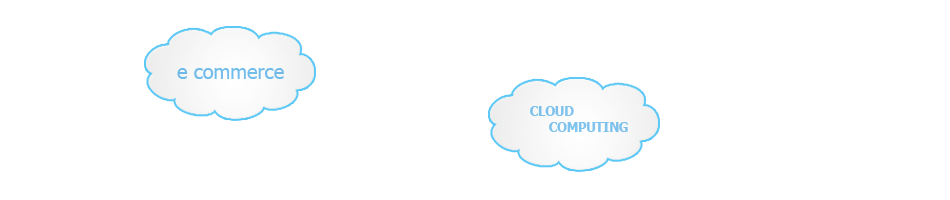
<style>
.page{position:relative;width:950px;height:200px;background:#ffffff}
.page>*{position:absolute;margin:0}
.t1{font:19.9px "Tahoma";color:#71bbea}
.t2{font:13.9px "Tahoma-Bold";color:#7ec2ec;scale:0.9 1}
</style>
<div class="page">
<p class="t1" style="left:177px;top:68px;width:107px;height:11px">e commerce</p>
<p class="t2" style="left:530px;top:106px;width:98px;height:26px">CLOUD <br> COMPUTING</p>
</div>
